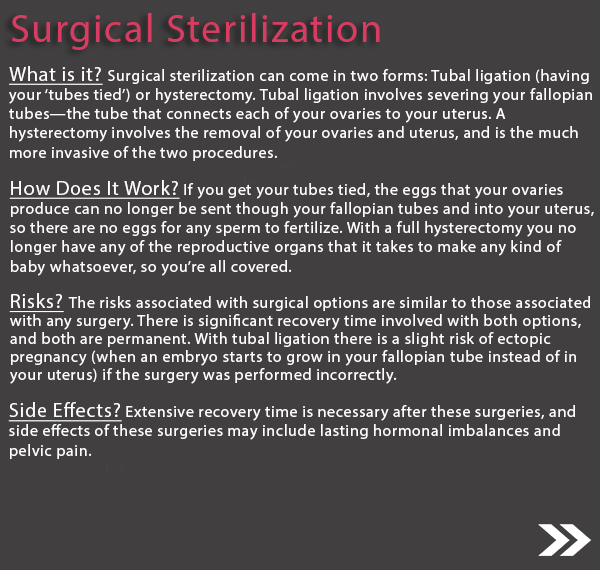
<style>
.page{position:relative;width:600px;height:570px;background:#413f3f}
.page>*{position:absolute;margin:0}
.t1{font:40px "MyriadPro-Regular";letter-spacing:0.04em;color:#d83c63}
.t2{font:16px "MyriadPro-Regular";letter-spacing:0.04em;color:#ffffff}
.t3{font:20px "MyriadPro-Regular";letter-spacing:0.04em;color:#ffffff;text-decoration:underline}
.t4{font:16px/18px "MyriadPro-Regular";letter-spacing:0.04em;color:#ffffff}
.t5{font:20px/20px "MyriadPro-Regular";letter-spacing:0.04em;color:#ffffff;text-decoration:underline}
</style>
<div class="page">
<p class="t1" style="left:12px;top:13px;width:368px;height:37px">Surgical Sterilization</p>
<p class="t2" style="left:9px;top:66px;width:583px;height:95px"><span class="t3">What is it? </span>Surgical sterilization can come in two forms: Tubal ligation (having <br>your ‘tubes tied’) or hysterectomy. Tubal ligation involves severing your fallopian<br>tubes—the tube that connects each of your ovaries to your uterus. A <br>hysterectomy involves the removal of your ovaries and uterus, and is the much <br>more invasive of the two procedures.</p>
<p class="t2" style="left:9px;top:180px;width:585px;height:96px"><span class="t3">How Does It Work? </span>If you get your tubes tied, the eggs that your ovaries <br>produce can no longer be sent though your fallopian tubes and into your uterus, <br>so there are no eggs for any sperm to fertilize. With a full hysterectomy you no <br>longer have any of the reproductive organs that it takes to make any kind of <br>baby whatsoever, so you’re all covered.</p>
<p class="t4" style="left:9px;top:293px;width:581px;height:91px"><span class="t3">Risks</span><span class="t5">? </span>The risks associated with surgical options are similar to those associated <br>with any surgery. There is significant recovery time involved with both options, <br>and both are permanent. With tubal ligation there is a slight risk of ectopic<br>pregnancy (when an embryo starts to grow in your fallopian tube instead of in <br>your uterus) if the surgery was performed incorrectly.</p>
<p class="t2" style="left:8px;top:402px;width:567px;height:57px"><span class="t3">Side Effects? </span>Extensive recovery time is necessary after these surgeries, and <br>side effects of these surgeries may include lasting hormonal imbalances and <br>pelvic pain.</p>
</div>
